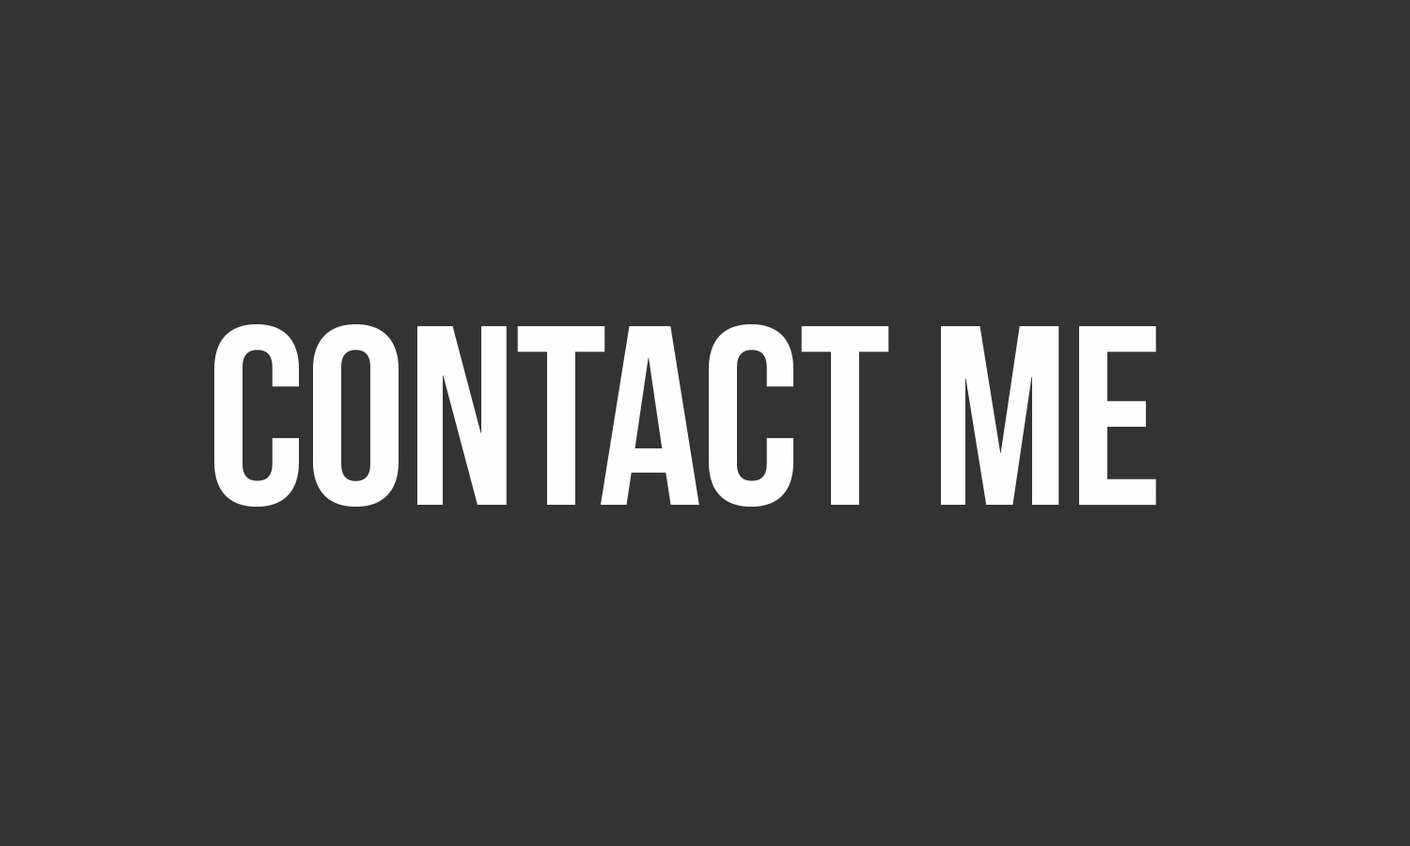
<style>
.page{position:relative;width:1410px;height:846px;background:#333333}
.page>*{position:absolute;margin:0}
.t1{font:255.6px "BebasNeue";color:#fefefe}
</style>
<div class="page">
<p class="t1" style="left:214px;top:324px;width:942px;height:184px">contact me</p>
</div>
